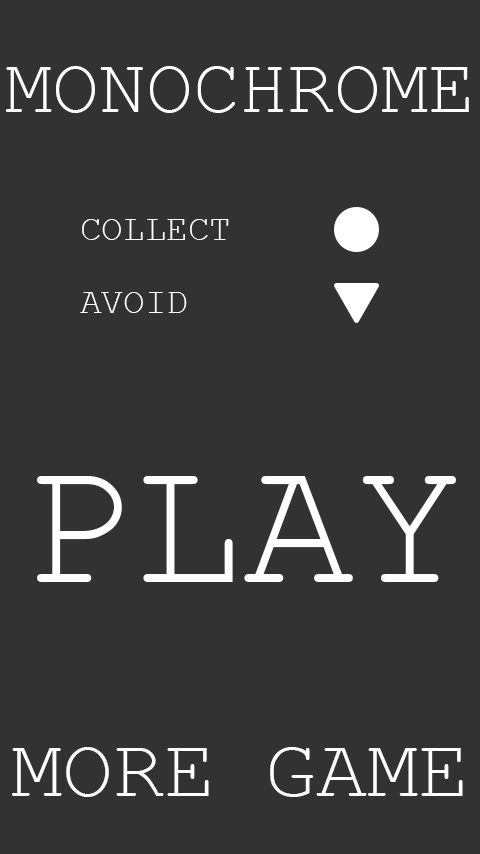
<style>
.page{position:relative;width:480px;height:854px;background:#323232}
.page>*{position:absolute;margin:0}
.t1{font:78.3px "CourierNewPSMT";color:#ffffff}
.t2{font:36px "CourierNewPSMT";color:#ffffff}
.t3{font:185.2px "CourierNewPSMT";color:#fefefe}
.t4{font:85px "CourierNewPSMT";color:#fefefe}
</style>
<div class="page">
<p class="t1" style="left:6px;top:66px;width:463px;height:47px">MONOCHROME</p>
<p class="t2" style="left:82px;top:219px;width:147px;height:21px">COLLECT</p>
<p class="t2" style="left:80px;top:292px;width:107px;height:21px">AVOID</p>
<p class="t3" style="left:37px;top:476px;width:419px;height:106px">PLAY</p>
<p class="t4" style="left:12px;top:747px;width:451px;height:50px">MORE GAME</p>
</div>
